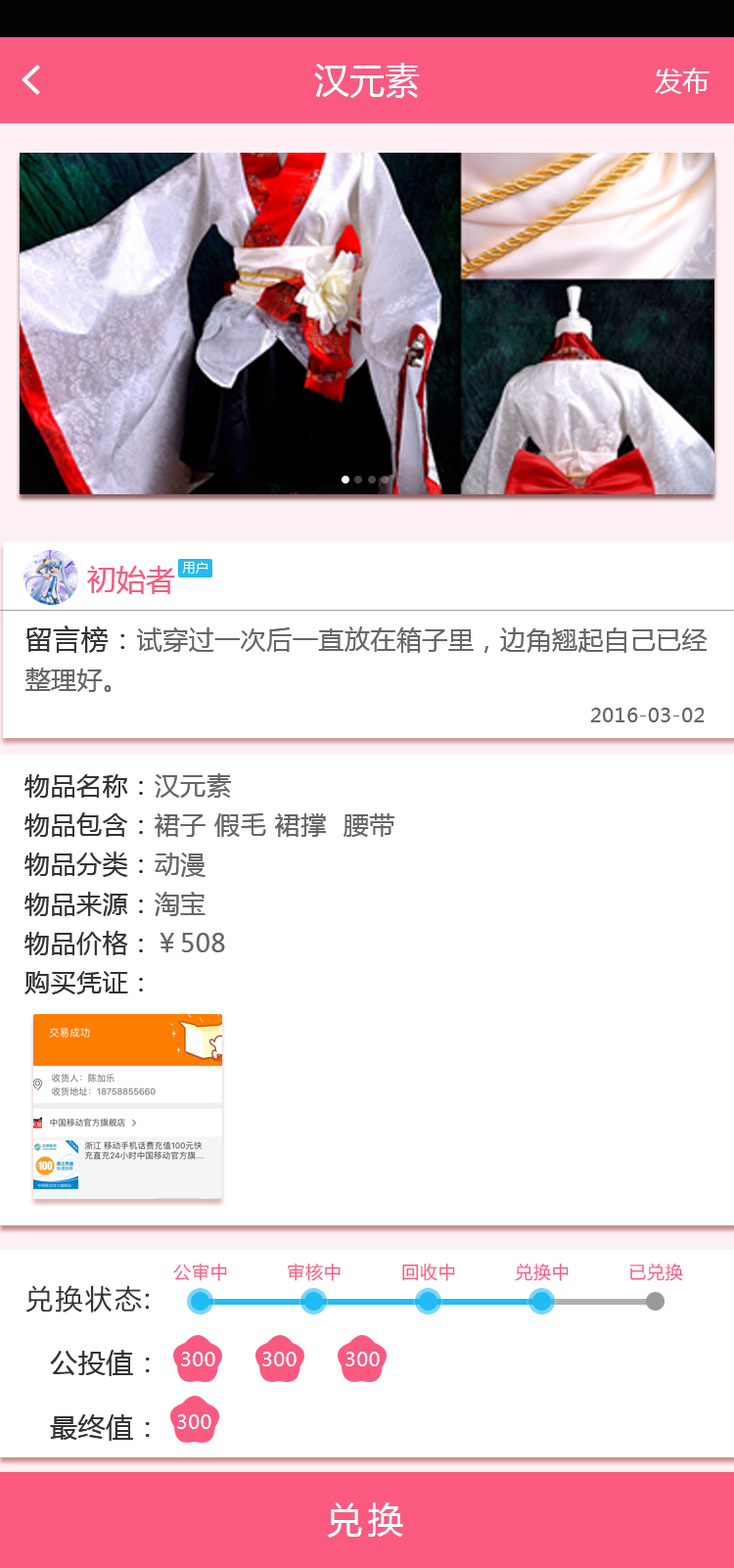
<style>
.page{position:relative;width:734px;height:1568px;background:#ffffff}
.page>*{position:absolute;margin:0}
.t1{font:35.2px "MicrosoftYaHei";color:#ffffff}
.t2{font:27.4px "MicrosoftYaHei";color:#ffffff}
.t3{font:29.4px "MicrosoftYaHei";color:#fa5a80}
.t4{font:13.4px "MicrosoftYaHei";color:#ffffff}
.t5{font:25.4px/42.1px "MicrosoftYaHei";letter-spacing:0.02em;color:#666666}
.t6{font:27.4px/42.1px "MicrosoftYaHei";letter-spacing:0.02em;color:#333333}
.t7{font:19.6px "MicrosoftYaHei";letter-spacing:0.02em;color:#666666}
.t8{font:25.4px "MicrosoftYaHei";letter-spacing:0.02em;color:#333333}
.t9{font:25.4px "MicrosoftYaHei";letter-spacing:0.02em;color:#666666}
.t10{font:17.6px "MicrosoftYaHei";letter-spacing:0.04em;color:#fa5a80}
.t11{font:27.4px "MicrosoftYaHei";letter-spacing:0.08em;color:#333333}
.t12{font:27.4px "MicrosoftYaHei";letter-spacing:0.02em;color:#333333}
.t13{font:19.6px "MicrosoftYaHei";letter-spacing:0.02em;color:#ffffff}
.t14{font:35.2px "MicrosoftYaHei";letter-spacing:0.16em;color:#ffffff}
</style>
<div class="page">
<p class="t1" style="left:314px;top:63px;width:106px;height:35px">汉元素</p>
<p class="t2" style="left:655px;top:68px;width:55px;height:26px">发布</p>
<p class="t3" style="left:87px;top:566px;width:88px;height:28px">初始者</p>
<p class="t4" style="left:182px;top:562px;width:26px;height:12px">用户</p>
<p class="t5" style="left:24px;top:625px;width:684px;height:67px"><span class="t6">留言榜：</span>试穿过一次后一直放在箱子里，边角翘起自己已经<br>整理好。</p>
<p class="t7" style="left:591px;top:708px;width:114px;height:14px">2016-03-02</p>
<p class="t8" style="left:24px;top:773px;width:207px;height:25px">物品名称：<span class="t9">汉元素</span></p>
<p class="t9" style="left:24px;top:812px;width:370px;height:25px"><span class="t8">物品包含：</span>裙子 假毛 裙撑  腰带</p>
<p class="t8" style="left:24px;top:852px;width:182px;height:25px">物品分类：<span class="t9">动漫</span></p>
<p class="t8" style="left:24px;top:892px;width:182px;height:24px">物品来源：<span class="t9">淘宝</span></p>
<p class="t8" style="left:24px;top:930px;width:201px;height:25px">物品价格：<span class="t9">￥508</span></p>
<p class="t8" style="left:24px;top:971px;width:119px;height:23px">购买凭证：</p>
<p class="t10" style="left:173px;top:1263px;width:54px;height:18px">公审中</p>
<p class="t10" style="left:288px;top:1263px;width:53px;height:18px">审核中</p>
<p class="t10" style="left:402px;top:1263px;width:53px;height:18px">回收中</p>
<p class="t10" style="left:515px;top:1263px;width:54px;height:18px">兑换中</p>
<p class="t10" style="left:629px;top:1263px;width:54px;height:18px">已兑换</p>
<p class="t11" style="left:25px;top:1285px;width:125px;height:28px">兑换状态:</p>
<p class="t12" style="left:50px;top:1350px;width:100px;height:26px">公投值：</p>
<p class="t13" style="left:181px;top:1352px;width:34px;height:14px">300</p>
<p class="t13" style="left:262px;top:1352px;width:35px;height:14px">300</p>
<p class="t13" style="left:346px;top:1352px;width:34px;height:14px">300</p>
<p class="t12" style="left:50px;top:1414px;width:100px;height:27px">最终值：</p>
<p class="t13" style="left:177px;top:1414px;width:34px;height:15px">300</p>
<p class="t14" style="left:327px;top:1502px;width:76px;height:36px">兑换</p>
</div>
